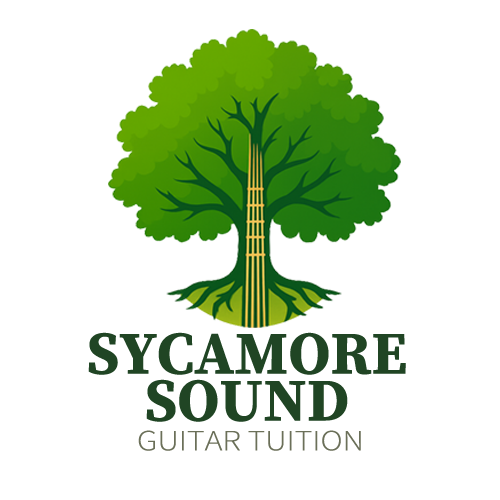
<style>
.page{position:relative;width:500px;height:500px;background:#ffffff}
.page>*{position:absolute;margin:0}
.t1{font:60px "SourceSerif4Roman-Bold";color:#204524}
.t2{font:29.3px "SourceSansRoman-Light";color:#6b7059;scale:1.15 1}
</style>
<div class="page">
<p class="t1" style="left:88px;top:332px;width:318px;height:90px;text-align:center">SYCAMORE<br>SOUND</p>
<p class="t2" style="left:138px;top:430px;width:223px;height:21px">GUITAR TUITION</p>
</div>
